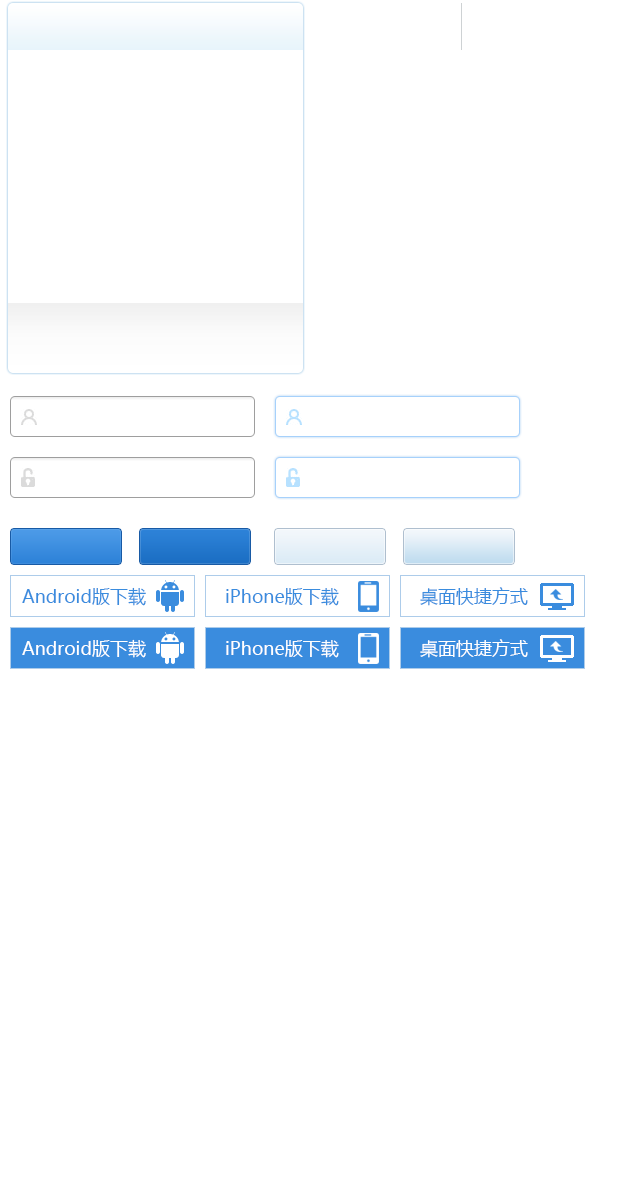
<style>
.page{position:relative;width:620px;height:1200px;background:#ffffff}
.page>*{position:absolute;margin:0}
.t1{font:18px "MicrosoftYaHei";color:#3a8cde}
.t2{font:18px "MicrosoftYaHei";color:#ffffff}
</style>
<div class="page">
<p class="t1" style="left:22px;top:587px;width:124px;height:19px">Android版下载</p>
<p class="t1" style="left:226px;top:588px;width:113px;height:18px">iPhone版下载</p>
<p class="t1" style="left:420px;top:587px;width:108px;height:19px">桌面快捷方式</p>
<p class="t2" style="left:22px;top:639px;width:124px;height:19px">Android版下载</p>
<p class="t2" style="left:226px;top:640px;width:113px;height:18px">iPhone版下载</p>
<p class="t2" style="left:420px;top:639px;width:108px;height:19px">桌面快捷方式</p>
</div>
